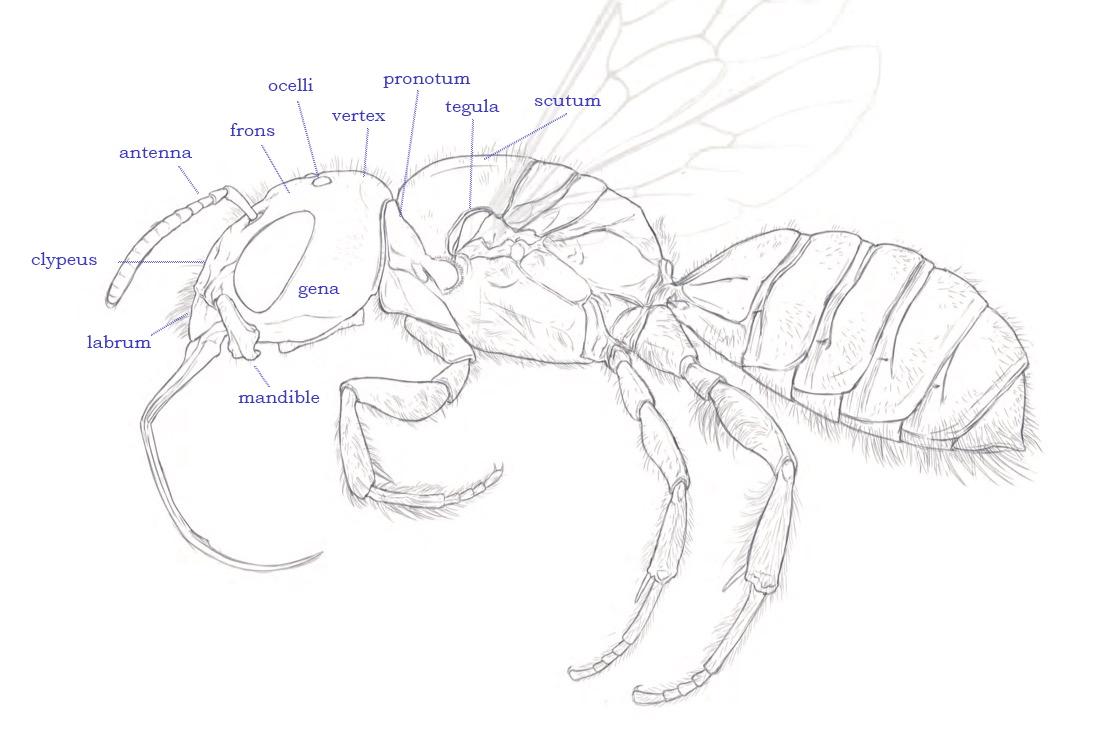
<style>
.page{position:relative;width:1120px;height:751px;background:#ffffff}
.page>*{position:absolute;margin:0}
.t1{font:18px "BookmanOldStyle";color:#3c38c8}
</style>
<div class="page">
<p class="t1" style="left:268px;top:78px;width:45px;height:13px">ocelli</p>
<p class="t1" style="left:383px;top:73px;width:88px;height:15px">pronotum</p>
<p class="t1" style="left:445px;top:99px;width:55px;height:17px">tegula</p>
<p class="t1" style="left:534px;top:95px;width:67px;height:11px">scutum</p>
<p class="t1" style="left:332px;top:110px;width:54px;height:11px">vertex</p>
<p class="t1" style="left:230px;top:123px;width:45px;height:13px">frons</p>
<p class="t1" style="left:119px;top:147px;width:74px;height:11px">antenna</p>
<p class="t1" style="left:31px;top:252px;width:66px;height:17px">clypeus</p>
<p class="t1" style="left:298px;top:286px;width:42px;height:12px">gena</p>
<p class="t1" style="left:87px;top:335px;width:64px;height:13px">labrum</p>
<p class="t1" style="left:238px;top:390px;width:82px;height:13px">mandible</p>
</div>
